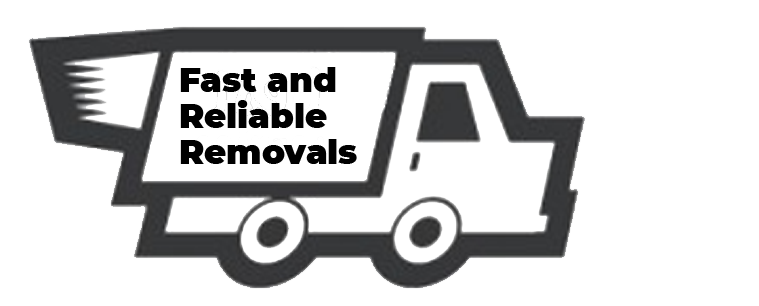
<style>
.page{position:relative;width:759px;height:306px;background:#ffffff}
.page>*{position:absolute;margin:0}
.t1{font:34px/36px "Montserrat-Black";color:#000000}
</style>
<div class="page">
<p class="t1" style="left:180px;top:67px;width:177px;height:97px">Fast and <br>Reliable<br>Removals</p>
</div>
